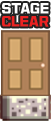
<style>
.page{position:relative;width:51px;height:121px}
.page>*{position:absolute;margin:0}
.t1{font:13.2px/13.5px "Typo_SsangmunDong_B";color:#ffffff}
.t2{font:13.2px/13.5px "Typo_SsangmunDong_B";color:#eb2222}
</style>
<div class="page">
<p class="t1" style="left:2px;top:3px;width:47px;height:24px">STAGE<br><span class="t2">CLEAR</span></p>
</div>
